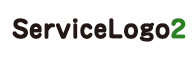
<style>
.page{position:relative;width:194px;height:60px;background:#ffffff}
.page>*{position:absolute;margin:0}
.t1{font:24px "Jun501Pro-Bold";color:#231815;font-weight:bold}
.t2{font:24px "Jun501Pro-Bold";color:#288321;font-weight:bold}
</style>
<div class="page">
<p class="t1" style="left:12px;top:18px;width:174px;height:24px">ServiceLogo<span class="t2">2</span></p>
</div>
